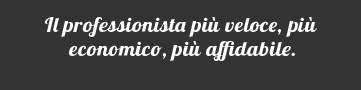
<style>
.page{position:relative;width:361px;height:90px;background:#333333}
.page>*{position:absolute;margin:0}
.t1{font:20px "Lobster1.4";letter-spacing:0.02em;color:#ffffff;scale:1.1 1}
</style>
<div class="page">
<p class="t1" style="left:45px;top:17px;width:272px;height:44px;text-align:center">Il professionista più veloce, più <br>economico, più affidabile.</p>
</div>
